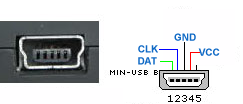
<style>
.page{position:relative;width:243px;height:104px;background:#ffffff}
.page>*{position:absolute;margin:0}
.t1{font:10px "Arial-BoldMT";color:#0f69c5}
</style>
<div class="page">
<p class="t1" style="left:174px;top:33px;width:22px;height:8px">GND</p>
<p class="t1" style="left:138px;top:45px;width:20px;height:8px">CLK</p>
<p class="t1" style="left:198px;top:48px;width:22px;height:8px">VCC</p>
<p class="t1" style="left:138px;top:57px;width:19px;height:8px">DAT</p>
</div>
